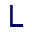
<style>
.page{position:relative;width:32px;height:32px;background:#ffffff}
.page>*{position:absolute;margin:0}
.t1{font:29.6px "ArialMT";color:#03045e}
</style>
<div class="page">
<p class="t1" style="left:10px;top:5px;width:14px;height:22px">L</p>
</div>
